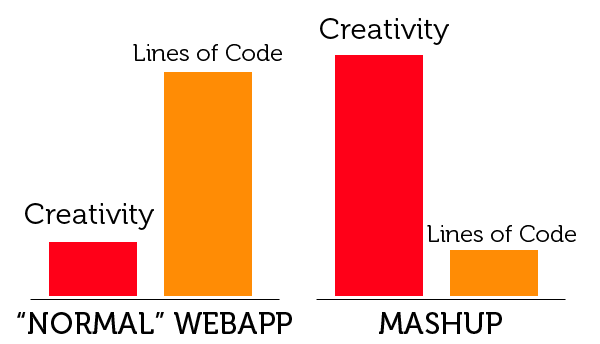
<style>
.page{position:relative;width:600px;height:344px;background:#ffffff}
.page>*{position:absolute;margin:0}
.t1{font:30px "Museo-300";color:#000000}
.t2{font:24px "Museo-300";color:#000000}
.t3{font:30px "Museo-500";color:#000000}
</style>
<div class="page">
<p class="t1" style="left:320px;top:18px;width:129px;height:27px">Creativity</p>
<p class="t2" style="left:133px;top:44px;width:149px;height:17px">Lines of Code</p>
<p class="t1" style="left:25px;top:203px;width:129px;height:27px">Creativity</p>
<p class="t2" style="left:427px;top:225px;width:149px;height:17px">Lines of Code</p>
<p class="t3" style="left:17px;top:312px;width:275px;height:22px">“NORMAL” WEBAPP</p>
<p class="t3" style="left:379px;top:312px;width:123px;height:22px">MASHUP</p>
</div>
